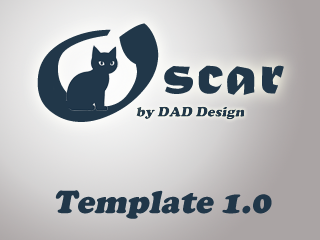
<style>
.page{position:relative;width:320px;height:240px}
.page>*{position:absolute;margin:0}
.t1{font:64.4px "MaturaMTScriptCapitals";letter-spacing:0.025em;color:#213749}
.t2{font:107.3px "MaturaMTScriptCapitals";letter-spacing:0.025em;color:#213749}
.t3{font:14.3px "CooperBlack";color:#213749;font-style:italic}
.t4{font:33.3px "CooperBlack";color:#213749;font-style:italic}
</style>
<div class="page">
<p class="t1" style="left:37px;top:23px;width:247px;height:99px"><span class="t2">O</span>scar</p>
<p class="t3" style="left:136px;top:106px;width:109px;height:14px">by DAD Design</p>
<p class="t4" style="left:55px;top:190px;width:217px;height:29px">Template 1.0</p>
</div>
